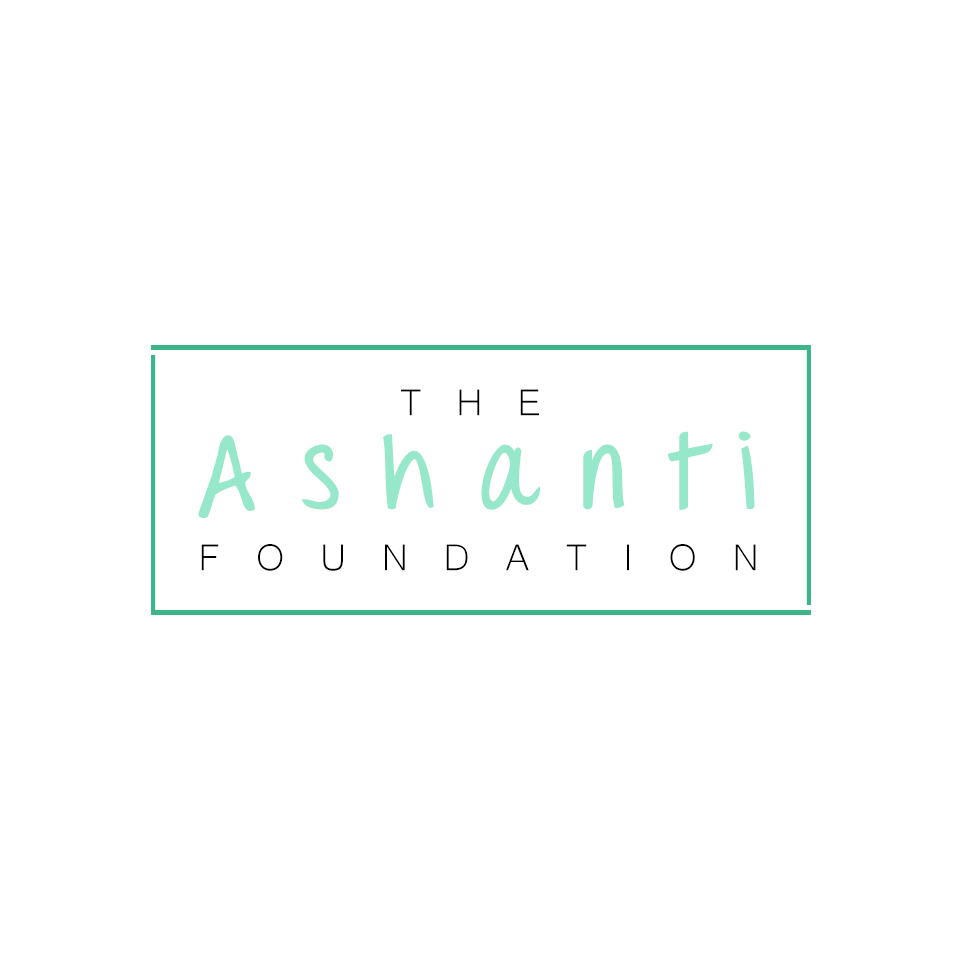
<style>
.page{position:relative;width:960px;height:960px;background:#ffffff}
.page>*{position:absolute;margin:0}
.t1{font:48px "Microsoft-Yi-Baiti";letter-spacing:0.72em;color:#000000}
.t2{font:100px "ThrowMyHandsUpintheAir-Bold";letter-spacing:0.44em;color:#97e7ca}
.t3{font:48px "Microsoft-Yi-Baiti";letter-spacing:0.74em;color:#000000}
</style>
<div class="page">
<p class="t1" style="left:401px;top:389px;width:138px;height:27px">THE</p>
<p class="t2" style="left:198px;top:431px;width:557px;height:87px">Ashanti</p>
<p class="t3" style="left:201px;top:544px;width:555px;height:27px">FOUNDATION</p>
</div>
